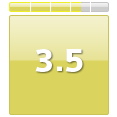
<style>
.page{position:relative;width:117px;height:117px;background:#dad35d}
.page>*{position:absolute;margin:0}
.t1{font:36px "Colaborate-Bold";color:#ffffff;text-transform:uppercase}
</style>
<div class="page">
<p class="t1" style="left:35px;top:49px;width:48px;height:23px">3.5</p>
</div>
